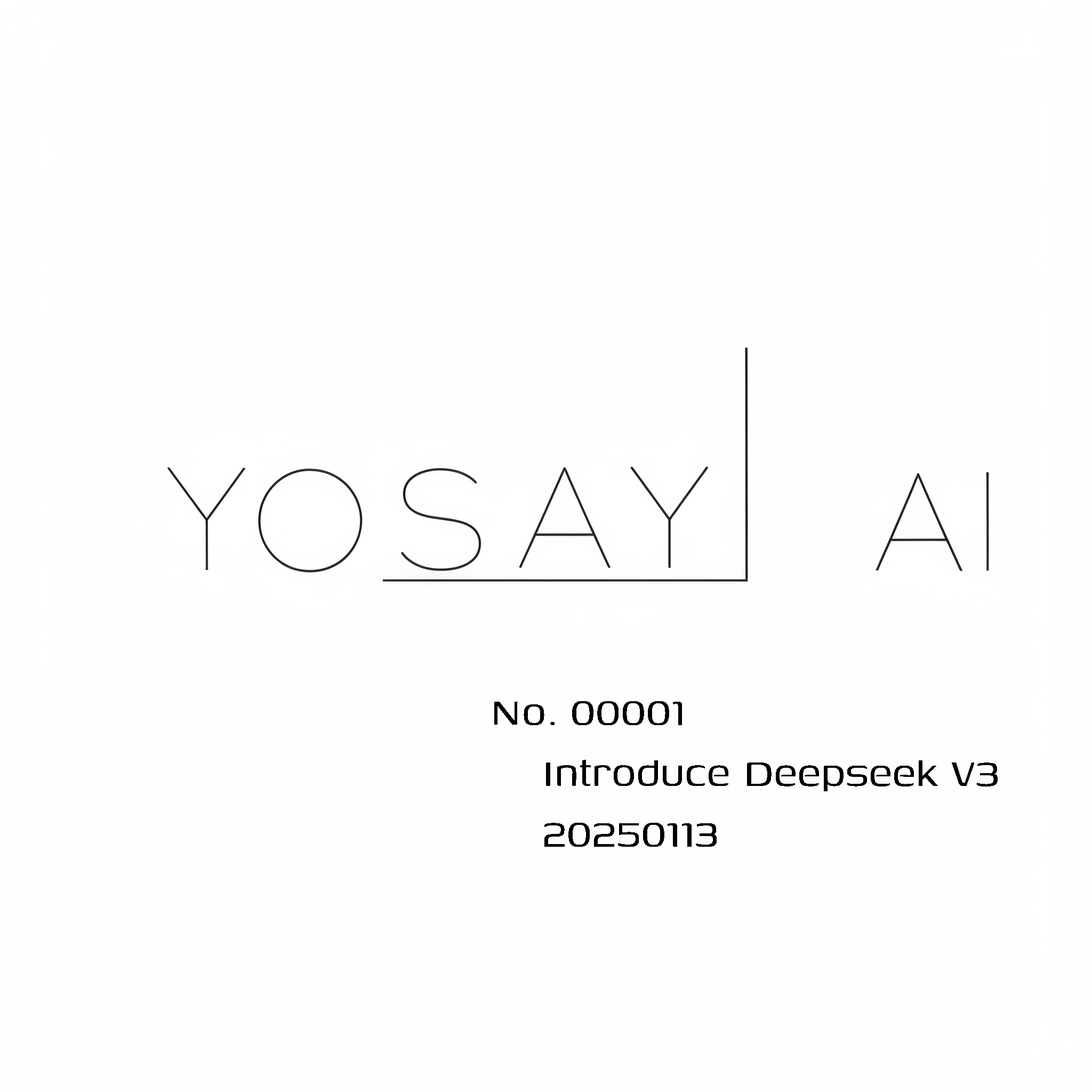
<style>
.page{position:relative;width:1092px;height:1092px;background:#fefefe}
.page>*{position:absolute;margin:0}
.t1{font:50.7px "Genos-Regular";color:#000000}
</style>
<div class="page">
<p class="t1" style="left:494px;top:701px;width:504px;height:146px">No. 00001<br>    Introduce Deepseek V3<br>    20250113</p>
</div>
